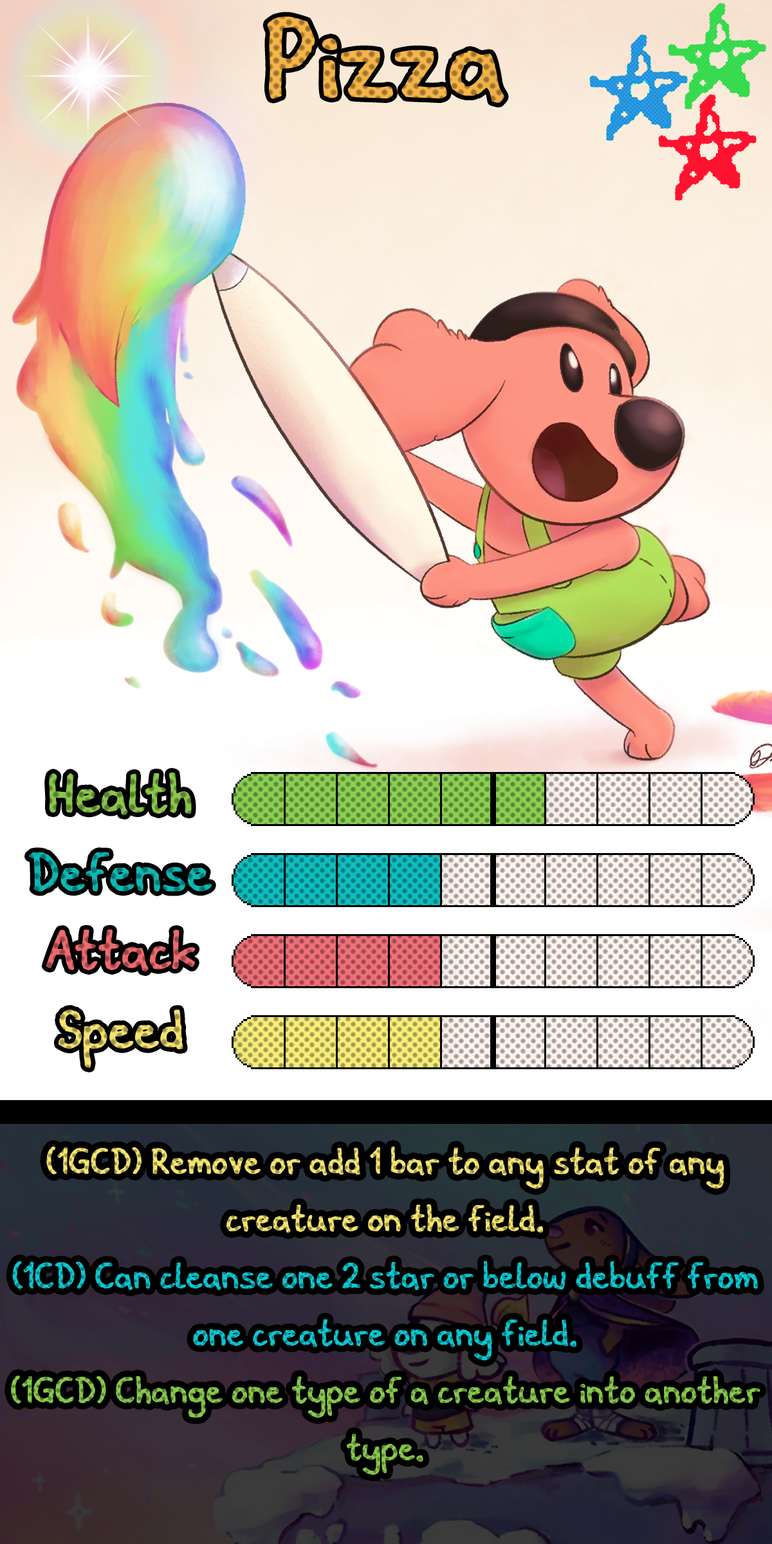
<style>
.page{position:relative;width:772px;height:1544px}
.page>*{position:absolute;margin:0}
.t1{font:194.3px "Domigorgon"}
.t2{font:92.7px "Domigorgon"}
.t3{font:61.8px/57.3px "Domigorgon"}
</style>
<div class="page">
<p class="t1" style="left:267px;top:16px;width:237px;height:87px">Pizza</p>
<p class="t2" style="left:49px;top:772px;width:143px;height:43px">Health</p>
<p class="t2" style="left:29px;top:852px;width:183px;height:40px">Defense</p>
<p class="t2" style="left:46px;top:930px;width:150px;height:42px">Attack</p>
<p class="t3" style="left:11px;top:1147px;width:750px;height:328px;text-align:center">(1GCD) Remove or add 1 bar to any stat of any creature on the field.<br>(1CD) Can cleanse one 2 star or below debuff from one creature on any field.<br>(1GCD) Change one type of a creature into another type.</p>
</div>
